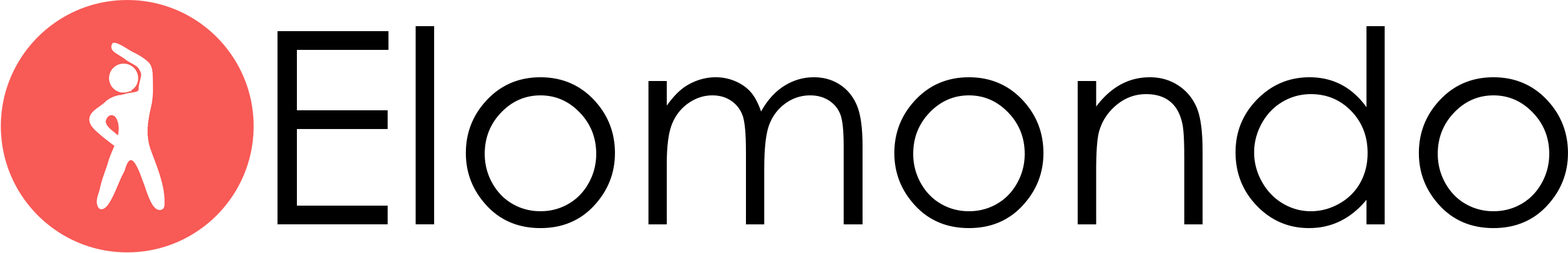
<style>
.page{position:relative;width:1568px;height:253px;background:#ffffff}
.page>*{position:absolute;margin:0}
.t1{font:269.1px "CenturyGothic";color:#000000}
</style>
<div class="page">
<p class="t1" style="left:277px;top:26px;width:1291px;height:202px">Elomondo</p>
</div>
